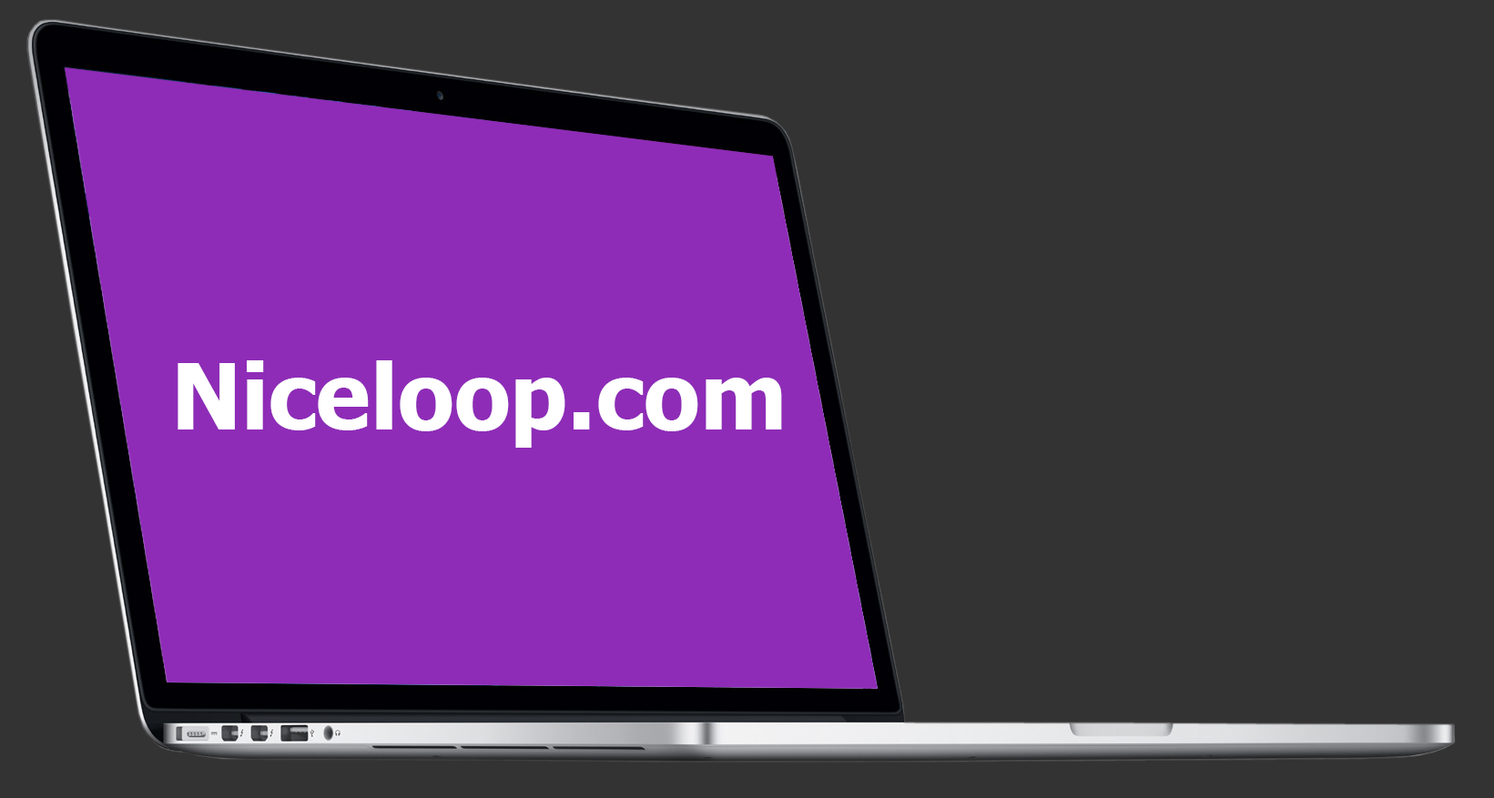
<style>
.page{position:relative;width:1494px;height:798px;background:#333333}
.page>*{position:absolute;margin:0}
.t1{font:91px "Tahoma-Bold";color:#ffffff}
</style>
<div class="page">
<p class="t1" style="left:177px;top:360px;width:605px;height:88px">Niceloop.com</p>
</div>
